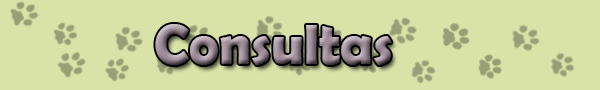
<style>
.page{position:relative;width:600px;height:90px;background:#dae3a7}
.page>*{position:absolute;margin:0}
.t1{font:56.9px "BerlinSansFBDemi-Bold"}
</style>
<div class="page">
<p class="t1" style="left:155px;top:24px;width:237px;height:41px">Consultas</p>
</div>
